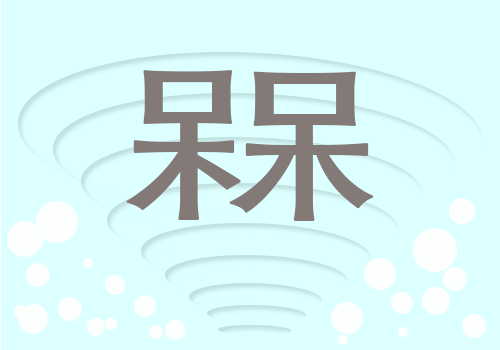
<style>
.page{position:relative;width:500px;height:350px;background:#dcffff}
.page>*{position:absolute;margin:0}
.t1{font:173.9px "STHeitiSC-Light";color:#837977;font-weight:bold;scale:1.54 1}
</style>
<div class="page">
<p class="t1" style="left:126px;top:70px;width:248px;height:151px">槑</p>
</div>
